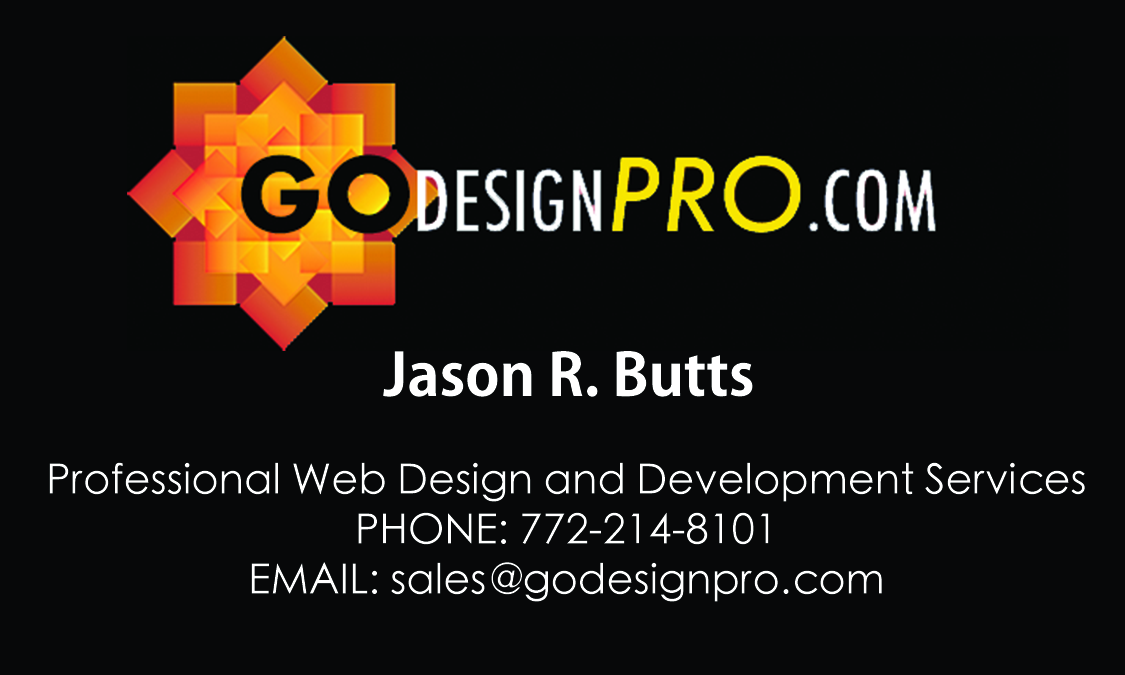
<style>
.page{position:relative;width:1125px;height:675px;background:#070809}
.page>*{position:absolute;margin:0}
.t1{font:58.3px "AdobeGothicStd-Bold";color:#ffffff}
.t2{font:41.7px "STHeiti";color:#ffffff}
</style>
<div class="page">
<p class="t1" style="left:383px;top:351px;width:370px;height:46px">Jason R. Butts</p>
<p class="t2" style="left:49px;top:462px;width:1036px;height:140px;text-align:center">Professional Web Design and Development Services<br>PHONE: 772-214-8101<br>EMAIL: sales@godesignpro.com</p>
</div>
